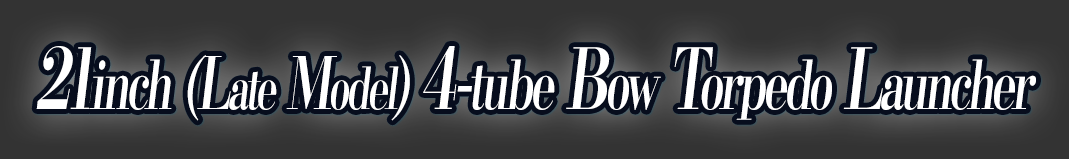
<style>
.page{position:relative;width:1069px;height:159px;background:#333333}
.page>*{position:absolute;margin:0}
.t1{font:67.2px "KochoStd-Heavy";letter-spacing:-0.08em;color:#ffffff;font-style:italic;scale:0.68 1}
.t2{font:84px "KochoStd-Heavy";letter-spacing:-0.08em;color:#ffffff;font-style:italic;scale:0.68 1}
.t3{font:72px "KochoStd-Heavy";letter-spacing:-0.08em;color:#ffffff;font-style:italic;scale:0.68 1}
.t4{font:57.6px "KochoStd-Heavy";letter-spacing:-0.08em;color:#ffffff;font-style:italic;scale:0.68 1}
</style>
<div class="page">
<p class="t1" style="left:36px;top:46px;width:1000px;height:75px"><span class="t2">21</span>inch <span class="t3">(L</span><span class="t4">ate</span><span class="t3"> M</span><span class="t4">odel</span><span class="t3">) </span><span class="t2">4-</span>tube<span class="t2"> B</span>ow<span class="t2"> T</span>orpedo<span class="t2"> L</span>auncher</p>
</div>
